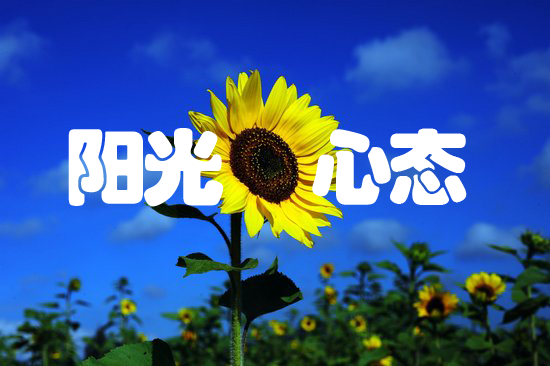
<style>
.page{position:relative;width:550px;height:366px}
.page>*{position:absolute;margin:0}
.t1{font:83.3px "STHupo";letter-spacing:-0.075em;color:#ffffff}
</style>
<div class="page">
<p class="t1" style="left:68px;top:128px;width:156px;height:79px">阳光</p>
<p class="t1" style="left:312px;top:128px;width:155px;height:77px">心态</p>
</div>
